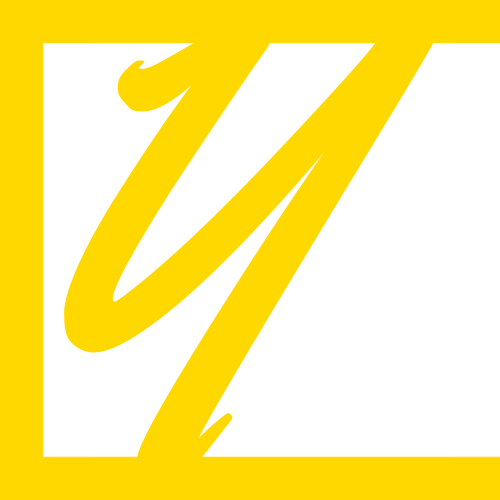
<style>
.page{position:relative;width:500px;height:500px;background:#ffffff}
.page>*{position:absolute;margin:0}
.t1{font:471px "Yellowtail";letter-spacing:0.02em;color:#ffd800;font-weight:bold}
</style>
<div class="page">
<p class="t1" style="left:64px;top:14px;width:371px;height:478px">Y</p>
</div>
